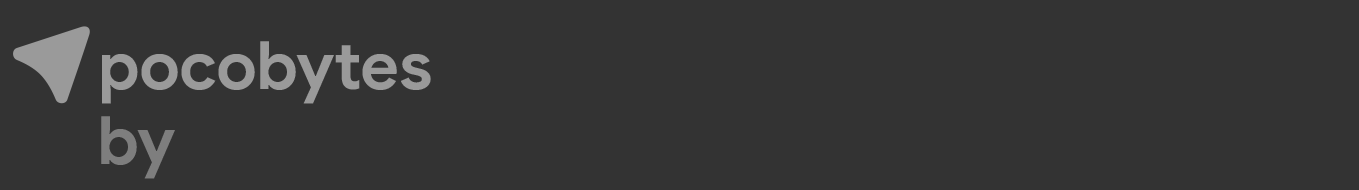
<style>
.page{position:relative;width:1359px;height:190px;background:#333333}
.page>*{position:absolute;margin:0}
.t1{font:66.7px "GoogleSans-Bold";letter-spacing:-0.01em;color:#9a9a9a}
.t2{font:66.7px "GoogleSans-Bold";letter-spacing:-0.01em;color:#7e7e7e}
</style>
<div class="page">
<p class="t1" style="left:102px;top:41px;width:329px;height:63px">pocobytes</p>
<p class="t2" style="left:101px;top:116px;width:74px;height:63px">by</p>
</div>
